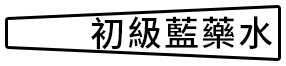
<style>
.page{position:relative;width:286px;height:66px;background:#ffffff}
.page>*{position:absolute;margin:0}
.t1{font:35px "NotoSansCJKtc-Medium";letter-spacing:0.06em;color:#000000}
</style>
<div class="page">
<p class="t1" style="left:91px;top:16px;width:182px;height:34px">初級藍藥水</p>
</div>
